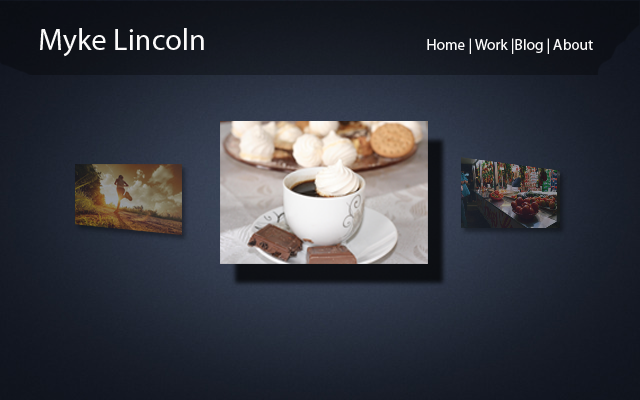
<style>
.page{position:relative;width:640px;height:400px}
.page>*{position:absolute;margin:0}
.t1{font:30.5px "MyriadPro-Regular";color:#fbfafa}
.t2{font:15.2px "MyriadPro-Regular";color:#fbfafa}
</style>
<div class="page">
<p class="t1" style="left:40px;top:28px;width:164px;height:29px">Myke Lincoln</p>
<p class="t2" style="left:427px;top:38px;width:166px;height:16px">Home | Work |Blog | About</p>
</div>
